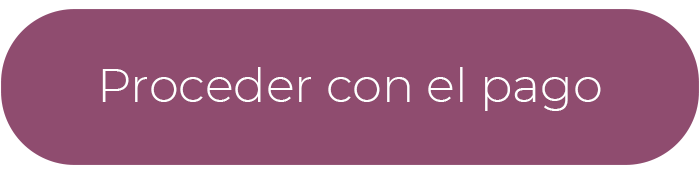
<style>
.page{position:relative;width:700px;height:175px;background:#8f4c6f}
.page>*{position:absolute;margin:0}
.t1{font:48px "Montserrat-Light";color:#ffffff}
</style>
<div class="page">
<p class="t1" style="left:102px;top:67px;width:499px;height:44px">Proceder con el pago</p>
</div>
